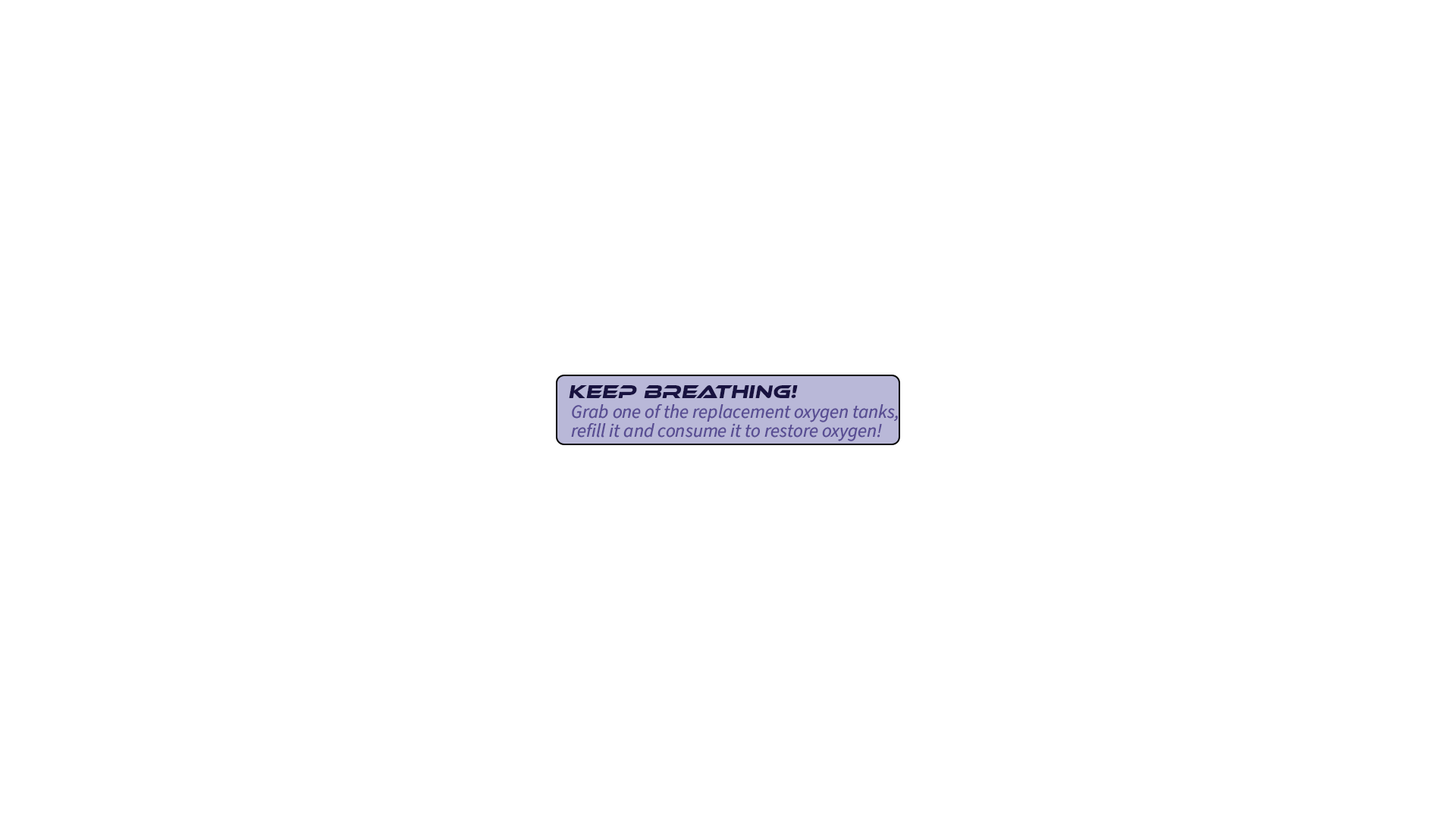
<style>
.page{position:relative;width:1456px;height:819px;background:#ffffff}
.page>*{position:absolute;margin:0}
.t1{font:18.9px "EthnocentricRg-Italic";color:#181240}
.t2{font:18.9px/18.9px "SourceSans3Italic-Italic";color:#594e93}
</style>
<div class="page">
<p class="t1" style="left:569px;top:385px;width:229px;height:13px">Keep Breathing!</p>
<p class="t2" style="left:571px;top:404px;width:327px;height:37px">Grab one of the replacement oxygen tanks,<br>refill it and consume it to restore oxygen!</p>
</div>
